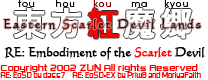
<style>
.page{position:relative;width:208px;height:80px;background:#ffffff}
.page>*{position:absolute;margin:0}
.t1{font:9px "TeXGyreAdventor-Regular";letter-spacing:0.1em;color:#110000}
.t2{font:9px "TeXGyreAdventor-Regular";letter-spacing:0.1em;color:#870000}
.t3{font:13px "CodexLT";letter-spacing:0.12em;font-weight:bold}
.t4{font:13px "CodexLT";letter-spacing:-0.02em;color:#000000;font-weight:bold}
.t5{font:13px "CodexLT";letter-spacing:-0.02em;color:#ff0000;font-weight:bold}
.t6{font:7px/7px "RussellSquare";letter-spacing:-0.02em;color:#ff0000;scale:0.88 1}
.t7{font:7px/7px "RussellSquare";letter-spacing:-0.02em;color:#ff0000;scale:1.3 1}
</style>
<div class="page">
<p class="t1" style="left:18px;top:0px;width:17px;height:7px">tou</p>
<p class="t1" style="left:56px;top:0px;width:19px;height:7px">hou</p>
<p class="t2" style="left:93px;top:0px;width:18px;height:7px">kou</p>
<p class="t1" style="left:131px;top:2px;width:16px;height:6px">ma</p>
<p class="t1" style="left:164px;top:0px;width:24px;height:9px">kyou</p>
<p class="t3" style="left:3px;top:18px;width:198px;height:12px">Eastern Scarlet Devil Lands</p>
<p class="t4" style="left:4px;top:47px;width:201px;height:13px">RE: Embodiment of the <span class="t5">Scarlet</span> Devil</p>
<p class="t6" style="left:0px;top:64px;width:201px;height:15px"><span class="t7">Copyright 2002 ZUN All rights Reserved<br></span>RE: EoSD by dass7 RE: EoSD-EX by Priw8 and MoriyaFaith</p>
</div>
